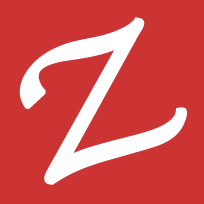
<style>
.page{position:relative;width:204px;height:204px;background:#cc3333}
.page>*{position:absolute;margin:0}
.t1{font:179.3px "Apple-Chancery";color:#ffffff;font-weight:bold;scale:1.6 1}
</style>
<div class="page">
<p class="t1" style="left:19px;top:17px;width:168px;height:168px;rotate:-20deg">Z</p>
</div>
